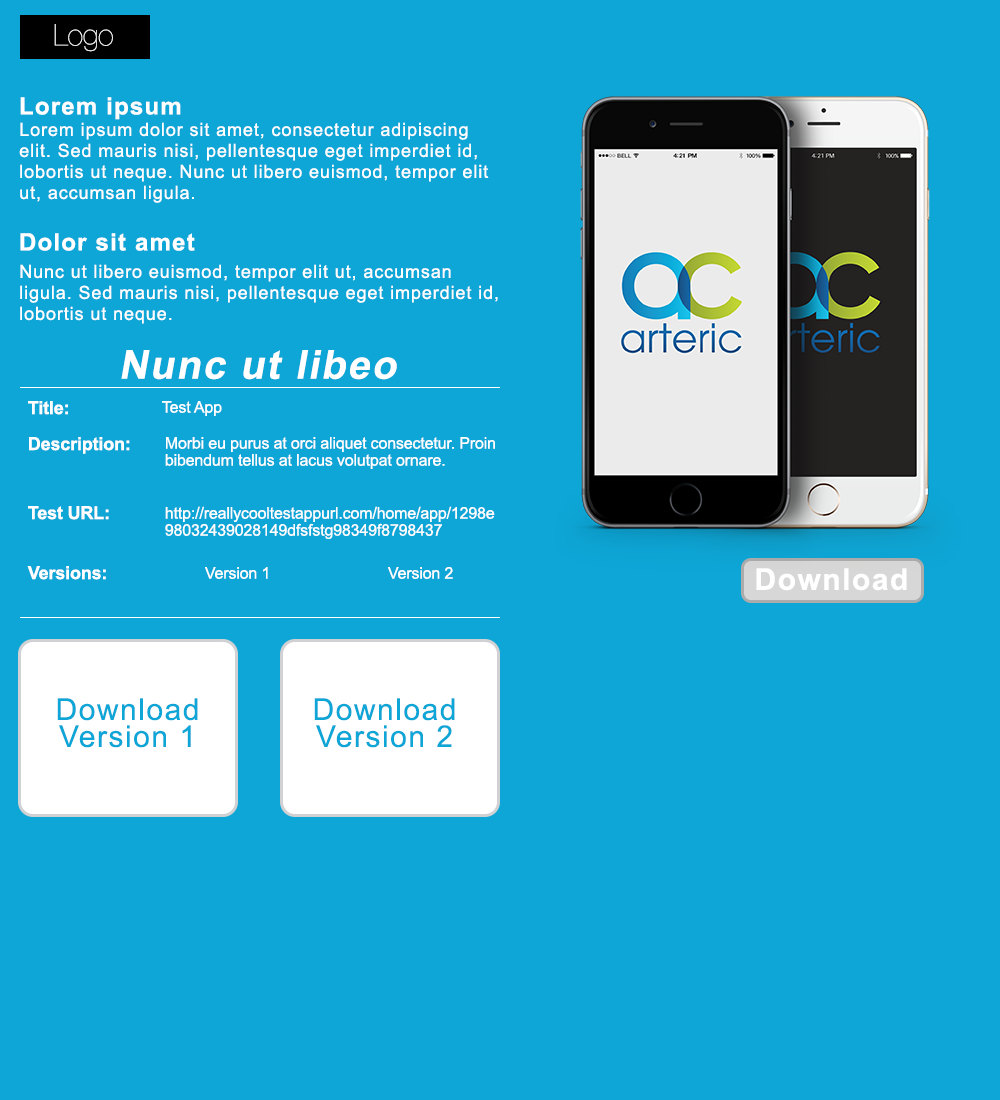
<style>
.page{position:relative;width:1000px;height:1100px;background:#0da6d6}
.page>*{position:absolute;margin:0}
.t1{font:30px "HelveticaNeue-UltraLight";letter-spacing:-0.01em;color:#ffffff}
.t2{font:24px "Arial-BoldMT";letter-spacing:0.05em;color:#ffffff}
.t3{font:18px/21px "ArialMT";letter-spacing:0.05em;color:#ffffff}
.t4{font:40px "Arial-BoldMT";letter-spacing:0.05em;color:#ffffff;font-style:italic}
.t5{font:18px "Arial-BoldMT";letter-spacing:-0.01em;color:#ffffff}
.t6{font:16px "ArialMT";letter-spacing:-0.01em;color:#ffffff}
.t7{font:16px/17px "ArialMT";letter-spacing:-0.01em;color:#ffffff}
.t8{font:30px "Arial-BoldMT";letter-spacing:0.05em;color:#ffffff}
.t9{font:30px/17px "ArialMT";letter-spacing:0.05em;color:#0da6d6}
</style>
<div class="page">
<p class="t1" style="left:54px;top:24px;width:59px;height:28px">Logo</p>
<p class="t2" style="left:20px;top:97px;width:161px;height:23px">Lorem ipsum</p>
<p class="t3" style="left:19px;top:122px;width:470px;height:81px">Lorem ipsum dolor sit amet, consectetur adipiscing elit. Sed mauris nisi, pellentesque eget imperdiet id, lobortis ut neque. Nunc ut libero euismod, tempor elit ut, accumsan ligula.</p>
<p class="t2" style="left:20px;top:233px;width:175px;height:18px">Dolor sit amet</p>
<p class="t3" style="left:20px;top:264px;width:478px;height:60px">Nunc ut libero euismod, tempor elit ut, accumsan ligula. Sed mauris nisi, pellentesque eget imperdiet id, lobortis ut neque.</p>
<p class="t4" style="left:121px;top:350px;width:276px;height:30px">Nunc ut libeo</p>
<p class="t5" style="left:28px;top:401px;width:40px;height:14px">Title:</p>
<p class="t6" style="left:162px;top:401px;width:60px;height:15px">Test App</p>
<p class="t5" style="left:29px;top:437px;width:101px;height:17px">Description:</p>
<p class="t7" style="left:165px;top:437px;width:330px;height:32px">Morbi eu purus at orci aliquet consectetur. Proin bibendum tellus at lacus volutpat ornare.</p>
<p class="t5" style="left:28px;top:506px;width:81px;height:14px">Test URL:</p>
<p class="t7" style="left:165px;top:506px;width:330px;height:33px">http://reallycooltestappurl.com/home/app/1298e98032439028149dfsfstg98349f8798437</p>
<p class="t5" style="left:27px;top:566px;width:79px;height:14px">Versions:</p>
<p class="t6" style="left:205px;top:567px;width:63px;height:12px">Version 1</p>
<p class="t6" style="left:388px;top:567px;width:65px;height:12px">Version 2</p>
<p class="t8" style="left:756px;top:568px;width:151px;height:23px">Download</p>
<p class="t9" style="left:57px;top:698px;width:141px;height:50px;text-align:center">Download<br>Version 1</p>
<p class="t9" style="left:314px;top:698px;width:141px;height:50px;text-align:center">Download<br>Version 2</p>
</div>
